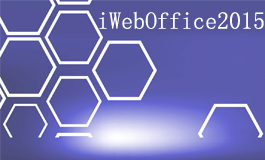
<style>
.page{position:relative;width:265px;height:160px}
.page>*{position:absolute;margin:0}
.t1{font:24px "YouYuan";color:#ffffff}
</style>
<div class="page">
<p class="t1" style="left:99px;top:11px;width:165px;height:18px">iWebOffice2015</p>
</div>
